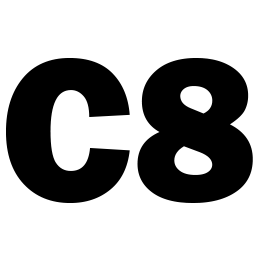
<style>
.page{position:relative;width:256px;height:256px;background:#ffffff}
.page>*{position:absolute;margin:0}
.t1{font:212px "FranklinGothic-Heavy";color:#000000}
</style>
<div class="page">
<p class="t1" style="left:6px;top:58px;width:247px;height:145px">C8</p>
</div>
